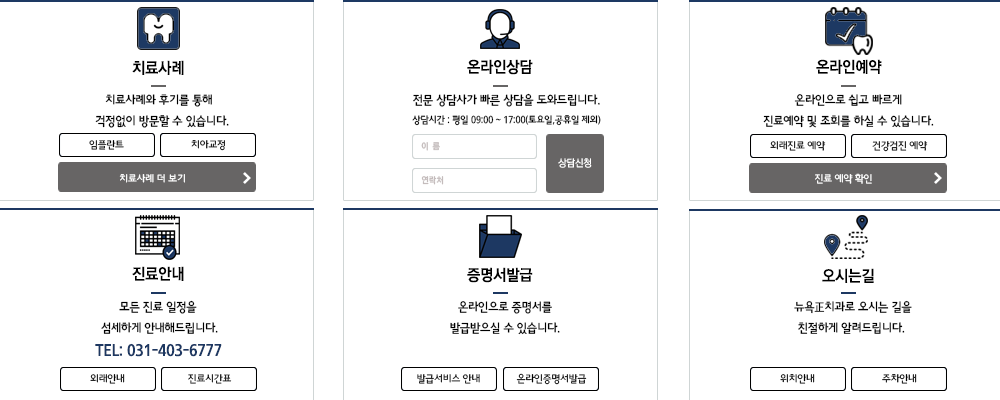
<style>
.page{position:relative;width:1000px;height:400px;background:#ffffff}
.page>*{position:absolute;margin:0}
.t1{font:15.7px "RixGoB";letter-spacing:-0.015em;color:#000000;scale:0.94 1}
.t2{font:12.2px "RixBGM";letter-spacing:-0.015em;color:#000000;scale:0.93 1}
.t3{font:9.8px "RixBGM";letter-spacing:-0.015em;color:#000000;scale:0.93 1}
.t4{font:10.2px "RixBGL";letter-spacing:-0.015em;color:#000000;scale:0.96 1}
.t5{font:10.2px "RixBGL";letter-spacing:-0.015em;scale:0.96 1}
.t6{font:9px "RixMGoEB";letter-spacing:-0.015em;color:#c4bcbc;scale:0.91 1}
.t7{font:10px "RixGoL";letter-spacing:-0.015em;color:#ffffff;scale:0.94 1}
.t8{font:10.2px "RixBGL";letter-spacing:-0.015em;color:#ffffff;scale:0.96 1}
.t9{font:15.8px "RixBGB";letter-spacing:-0.015em;color:#1d3862;scale:0.95 1}
</style>
<div class="page">
<p class="t1" style="left:132px;top:60px;width:52px;height:15px">치료사례</p>
<p class="t1" style="left:467px;top:59px;width:66px;height:16px">온라인상담</p>
<p class="t1" style="left:816px;top:59px;width:66px;height:15px">온라인예약</p>
<p class="t2" style="left:95px;top:94px;width:134px;height:34px;text-align:center">치료사례와 후기를 통해 <br> 걱정없이 방문할 수 있습니다.</p>
<p class="t3" style="left:412px;top:93px;width:189px;height:33px;text-align:center"><span class="t2">전문 상담사가 빠른 상담을 도와드립니다.<br></span>상담시간 : 평일 09:00 ~ 17:00(토요일,공휴일 제외)</p>
<p class="t2" style="left:763px;top:94px;width:171px;height:34px;text-align:center">온라인으로 쉽고 빠르게<br>진료예약 및 조회를 하실 수 있습니다.</p>
<p class="t4" style="left:89px;top:140px;width:35px;height:10px">임플란트</p>
<p class="t5" style="left:191px;top:140px;width:34px;height:11px">치아교정</p>
<p class="t6" style="left:421px;top:142px;width:19px;height:9px">이  름</p>
<p class="t5" style="left:770px;top:141px;width:56px;height:10px">외래진료 예약</p>
<p class="t5" style="left:872px;top:141px;width:56px;height:11px">건강검진 예약</p>
<p class="t7" style="left:558px;top:158px;width:34px;height:10px">상담신청</p>
<p class="t8" style="left:119px;top:174px;width:66px;height:9px">치료사례 더 보기</p>
<p class="t8" style="left:815px;top:173px;width:57px;height:11px">진료 예약 확인</p>
<p class="t6" style="left:421px;top:176px;width:23px;height:9px">연락처</p>
<p class="t1" style="left:132px;top:266px;width:52px;height:15px">진료안내</p>
<p class="t1" style="left:467px;top:267px;width:66px;height:16px">증명서발급</p>
<p class="t1" style="left:822px;top:268px;width:52px;height:15px">오시는길</p>
<p class="t2" style="left:101px;top:300px;width:117px;height:34px;text-align:center">모든 진료 일정을 <br>섬세하게 안내해드립니다.</p>
<p class="t2" style="left:450px;top:301px;width:110px;height:34px;text-align:center">온라인으로 증명서를<br>발급받으실 수 있습니다.</p>
<p class="t2" style="left:794px;top:300px;width:118px;height:34px;text-align:center">뉴욕正치과로 오시는 길을<br>친절하게 알려드립니다.</p>
<p class="t9" style="left:95px;top:343px;width:127px;height:14px">TEL: 031-403-6777</p>
<p class="t4" style="left:90px;top:374px;width:35px;height:10px">외래안내</p>
<p class="t4" style="left:188px;top:374px;width:44px;height:10px">진료시간표</p>
<p class="t5" style="left:417px;top:374px;width:63px;height:10px">발급서비스 안내</p>
<p class="t4" style="left:516px;top:373px;width:71px;height:12px">온라인증명서발급</p>
<p class="t4" style="left:780px;top:374px;width:35px;height:10px">위치안내</p>
<p class="t4" style="left:882px;top:374px;width:35px;height:10px">주차안내</p>
</div>
